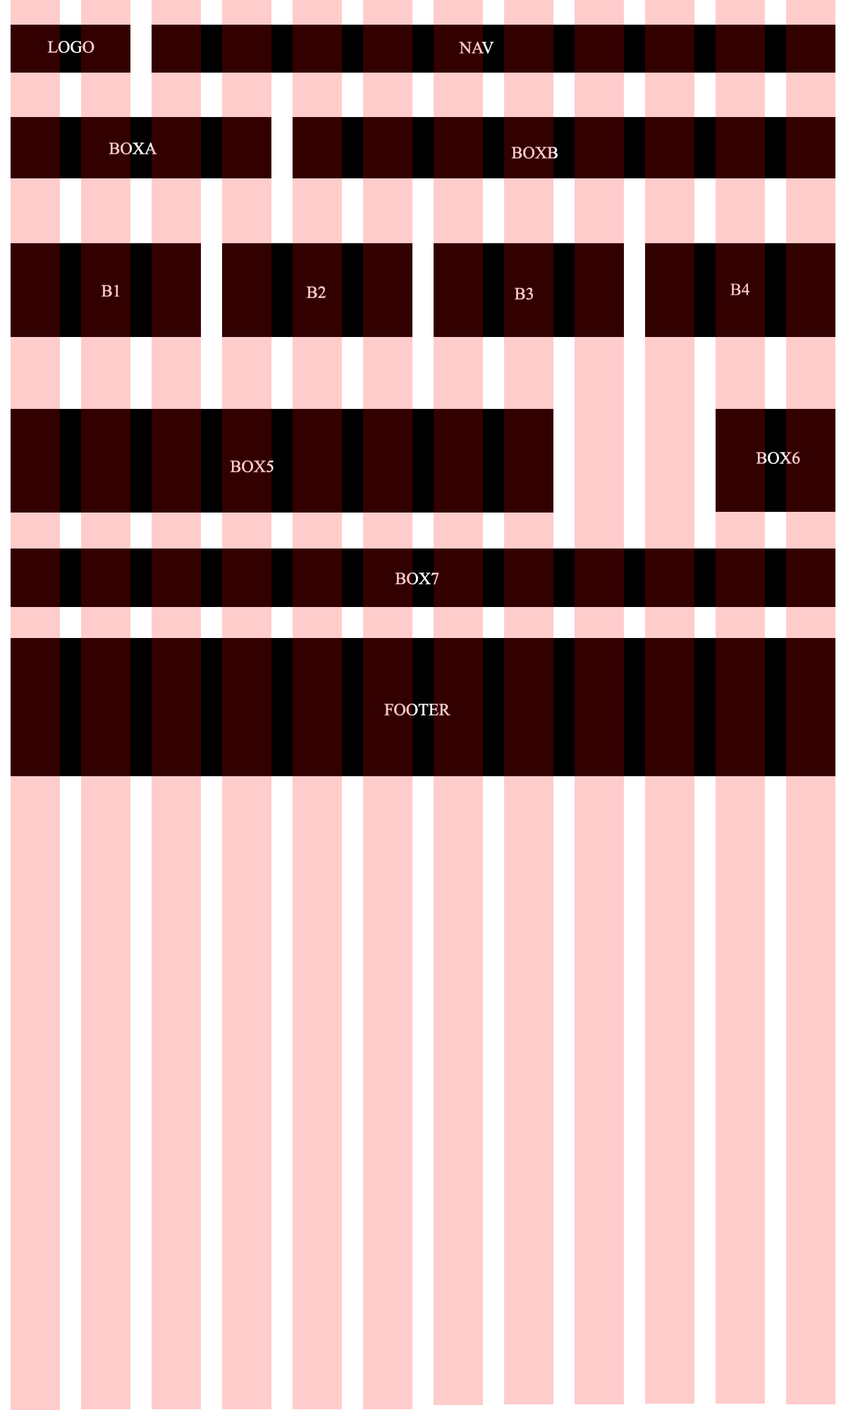
<style>
.page{position:relative;width:846px;height:1410px;background:#ffcccc}
.page>*{position:absolute;margin:0}
.t1{font:16.9px "TimesNewRomanPSMT"}
.t2{font:16.9px "TimesNewRomanPSMT";color:#ffcccc}
</style>
<div class="page">
<p class="t1" style="left:47px;top:41px;width:47px;height:12px">LOGO</p>
<p class="t2" style="left:459px;top:42px;width:35px;height:12px">NAV</p>
<p class="t1" style="left:109px;top:142px;width:48px;height:12px">BOXA</p>
<p class="t2" style="left:511px;top:147px;width:47px;height:12px">BOXB</p>
<p class="t2" style="left:102px;top:285px;width:17px;height:12px">B1</p>
<p class="t2" style="left:307px;top:286px;width:19px;height:12px">B2</p>
<p class="t2" style="left:515px;top:288px;width:18px;height:12px">B3</p>
<p class="t2" style="left:230px;top:460px;width:43px;height:12px">BOX5</p>
<p class="t1" style="left:756px;top:452px;width:44px;height:12px">BOX6</p>
<p class="t1" style="left:395px;top:572px;width:44px;height:12px">BOX7</p>
<p class="t2" style="left:384px;top:703px;width:66px;height:12px">FOOTER</p>
</div>
